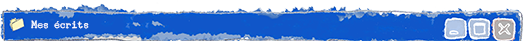
<style>
.page{position:relative;width:525px;height:41px;background:#ffffff}
.page>*{position:absolute;margin:0}
.t1{font:10px "UnderwoodChampion";color:#ffffff}
</style>
<div class="page">
<p class="t1" style="left:31px;top:20px;width:58px;height:9px">Mes écrits</p>
</div>
